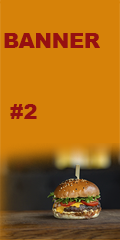
<style>
.page{position:relative;width:120px;height:240px;background:#d68209}
.page>*{position:absolute;margin:0}
.t1{font:20.6px/71.3px "Arial-Black";color:#961011}
</style>
<div class="page">
<p class="t1" style="left:4px;top:33px;width:96px;height:86px">BANNER<br> #2</p>
</div>
